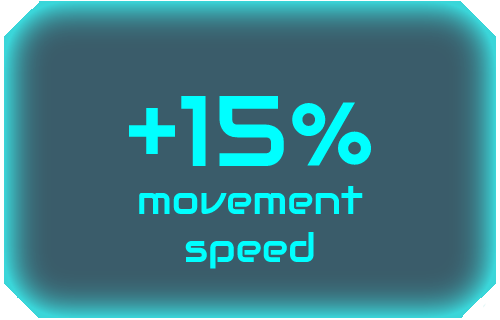
<style>
.page{position:relative;width:500px;height:320px;background:#3a5c6a}
.page>*{position:absolute;margin:0}
.t1{font:40px "Audiowide-Regular";color:#00ffff}
.t2{font:100px "Audiowide-Regular";color:#00ffff}
</style>
<div class="page">
<p class="t1" style="left:129px;top:95px;width:243px;height:174px;text-align:center"><span class="t2">+15%<br></span>movement<br>speed</p>
</div>
